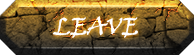
<style>
.page{position:relative;width:194px;height:55px}
.page>*{position:absolute;margin:0}
.t1{font:24px "VinerHandITC";color:#fefefe}
</style>
<div class="page">
<p class="t1" style="left:52px;top:16px;width:86px;height:22px">LEAVE</p>
</div>
